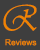
<style>
.page{position:relative;width:40px;height:50px;background:#3e3e3e}
.page>*{position:absolute;margin:0}
.t1{font:37.3px "Vivaldii";color:#f08302;scale:0.86 1}
.t2{font:8.3px "ArialMT";color:#f08302}
</style>
<div class="page">
<p class="t1" style="left:3px;top:4px;width:34px;height:27px">R</p>
<p class="t2" style="left:5px;top:39px;width:32px;height:7px">Reviews</p>
</div>
